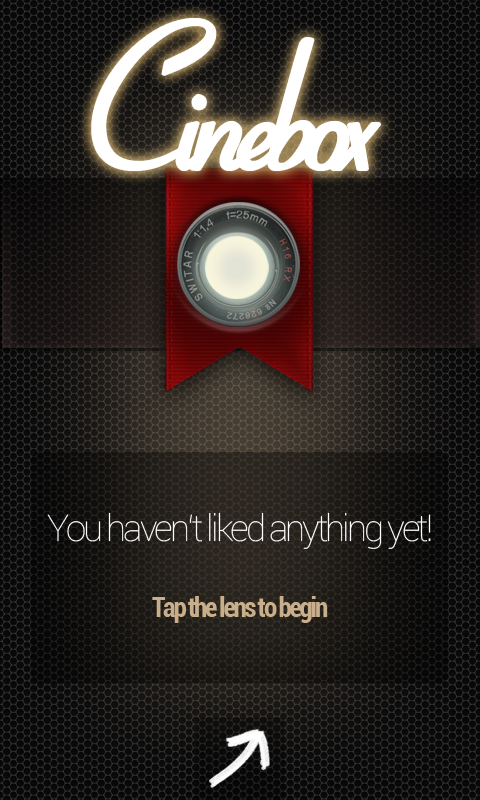
<style>
.page{position:relative;width:480px;height:800px}
.page>*{position:absolute;margin:0}
.t1{font:210px "Aspire-DemiBold";letter-spacing:-0.08em;color:#ffffff}
.t2{font:36.7px "Roboto-Thin";letter-spacing:-0.08em;color:#ffffff}
.t3{font:26.7px "Roboto-BoldCondensed";letter-spacing:-0.08em;color:#c8ae8a}
</style>
<div class="page">
<p class="t1" style="left:93px;top:20px;width:287px;height:149px">Cinebox</p>
<p class="t2" style="left:47px;top:512px;width:384px;height:111px;text-align:center">You haven‘t liked anything yet!<br><br><span class="t3">Tap the lens to begin</span></p>
</div>
